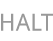
<style>
.page{position:relative;width:53px;height:41px;background:#ffffff}
.page>*{position:absolute;margin:0}
.t1{font:23.7px "DroidSans";color:#999999}
</style>
<div class="page">
<p class="t1" style="left:1px;top:13px;width:52px;height:18px">HALT</p>
</div>
